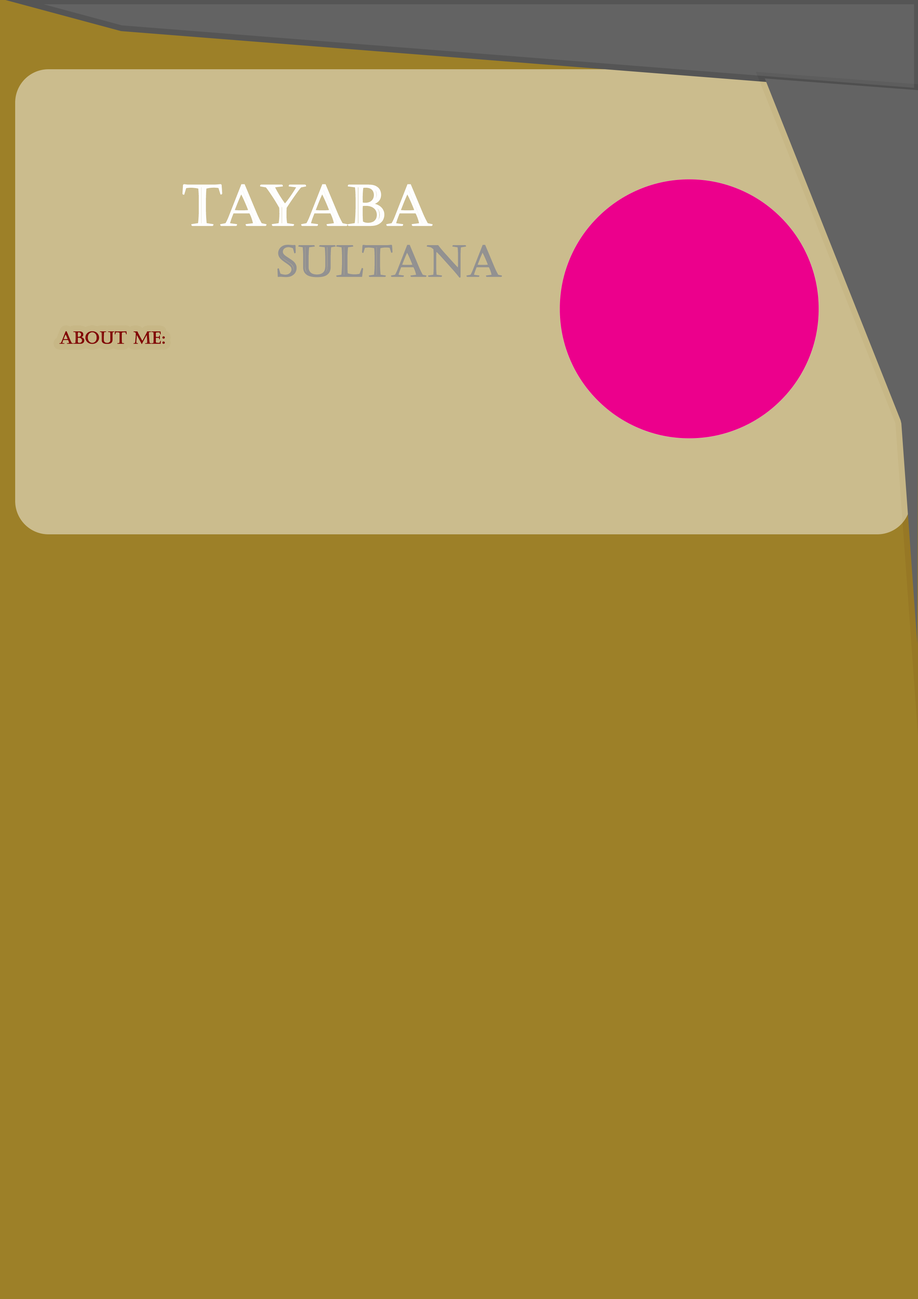
<style>
.page{position:relative;width:918px;height:1299px;background:#9d8028}
.page>*{position:absolute;margin:0}
.t1{font:42.6px "Castellar";color:#929191;font-variant:small-caps;font-weight:bold}
.t2{font:55.5px "Castellar";color:#fefefe;font-variant:small-caps;font-weight:bold}
.t3{font:16.7px "Castellar";color:#810202;font-variant:small-caps;font-weight:bold}
</style>
<div class="page">
<p class="t1" style="left:182px;top:184px;width:320px;height:94px"><span class="t2">TAYABA <br>      </span>SULTANA</p>
<p class="t3" style="left:59px;top:331px;width:106px;height:13px">ABOUT ME:</p>
</div>
